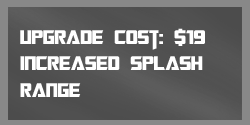
<style>
.page{position:relative;width:250px;height:125px}
.page>*{position:absolute;margin:0}
.t1{font:22px "TransformersMovie";color:#ffffff}
</style>
<div class="page">
<p class="t1" style="left:20px;top:28px;width:185px;height:69px">upgrade cost: $19<br>Increased Splash<br>Range</p>
</div>
